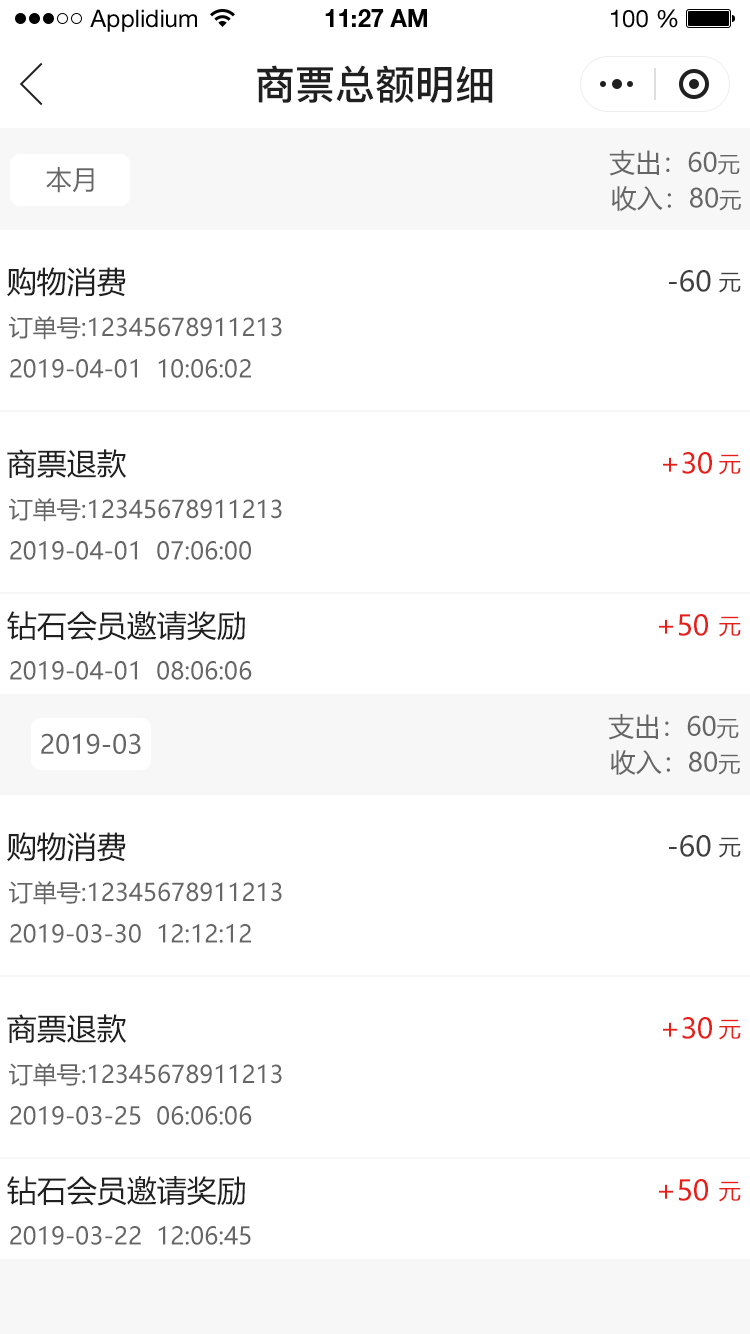
<style>
.page{position:relative;width:750px;height:1334px;background:#ffffff}
.page>*{position:absolute;margin:0}
.t1{font:24px "HelveticaNeueLTStd-Roman";color:#000000}
.t2{font:24px "HelveticaNeueLTStd-Bd";color:#000000}
.t3{font:40px "PingFang-SC-Bold";color:#202020;text-transform:uppercase}
.t4{font:26px "MicrosoftYaHei";color:#666666;text-transform:uppercase}
.t5{font:22px "MicrosoftYaHei";color:#666666;text-transform:uppercase}
.t6{font:30px "MicrosoftYaHei";color:#202020;text-transform:uppercase}
.t7{font:28px "MicrosoftYaHei";color:#404040;text-transform:uppercase}
.t8{font:22px "MicrosoftYaHei";color:#404040;text-transform:uppercase}
.t9{font:24px "MicrosoftYaHei";color:#666666;text-transform:uppercase}
.t10{font:28px "MicrosoftYaHei";color:#e61f18;text-transform:uppercase}
.t11{font:22px "MicrosoftYaHei";color:#e61f18;text-transform:uppercase}
</style>
<div class="page">
<p class="t1" style="left:90px;top:9px;width:107px;height:23px">Applidium</p>
<p class="t2" style="left:325px;top:9px;width:102px;height:18px">11:27 AM</p>
<p class="t1" style="left:611px;top:9px;width:67px;height:19px">100 %</p>
<p class="t3" style="left:257px;top:65px;width:236px;height:38px">商票总额明细</p>
<p class="t4" style="left:609px;top:150px;width:131px;height:26px">支出：60<span class="t5">元</span></p>
<p class="t4" style="left:46px;top:167px;width:48px;height:26px">本月</p>
<p class="t4" style="left:611px;top:186px;width:130px;height:25px">收入：80<span class="t5">元</span></p>
<p class="t6" style="left:7px;top:267px;width:119px;height:30px">购物消费</p>
<p class="t7" style="left:669px;top:270px;width:42px;height:22px">-60</p>
<p class="t8" style="left:719px;top:272px;width:22px;height:21px">元</p>
<p class="t9" style="left:9px;top:316px;width:273px;height:24px">订单号:12345678911213</p>
<p class="t9" style="left:10px;top:359px;width:241px;height:19px">2019-04-01  10:06:02</p>
<p class="t6" style="left:7px;top:449px;width:120px;height:29px">商票退款</p>
<p class="t10" style="left:663px;top:452px;width:49px;height:22px">+30</p>
<p class="t11" style="left:719px;top:454px;width:22px;height:21px">元</p>
<p class="t9" style="left:9px;top:498px;width:273px;height:24px">订单号:12345678911213</p>
<p class="t9" style="left:10px;top:541px;width:241px;height:19px">2019-04-01  07:06:00</p>
<p class="t6" style="left:7px;top:611px;width:238px;height:30px">钻石会员邀请奖励</p>
<p class="t10" style="left:659px;top:614px;width:49px;height:22px">+50</p>
<p class="t11" style="left:719px;top:616px;width:22px;height:21px">元</p>
<p class="t9" style="left:10px;top:661px;width:242px;height:19px">2019-04-01  08:06:06</p>
<p class="t4" style="left:608px;top:714px;width:131px;height:26px">支出：60<span class="t5">元</span></p>
<p class="t4" style="left:41px;top:733px;width:100px;height:21px">2019-03</p>
<p class="t4" style="left:610px;top:750px;width:130px;height:25px">收入：80<span class="t5">元</span></p>
<p class="t6" style="left:7px;top:832px;width:119px;height:30px">购物消费</p>
<p class="t7" style="left:669px;top:835px;width:42px;height:22px">-60</p>
<p class="t8" style="left:719px;top:837px;width:22px;height:21px">元</p>
<p class="t9" style="left:9px;top:881px;width:273px;height:24px">订单号:12345678911213</p>
<p class="t9" style="left:10px;top:924px;width:241px;height:19px">2019-03-30  12:12:12</p>
<p class="t6" style="left:7px;top:1014px;width:120px;height:29px">商票退款</p>
<p class="t10" style="left:663px;top:1017px;width:49px;height:22px">+30</p>
<p class="t11" style="left:719px;top:1019px;width:22px;height:21px">元</p>
<p class="t9" style="left:9px;top:1063px;width:273px;height:24px">订单号:12345678911213</p>
<p class="t9" style="left:10px;top:1106px;width:242px;height:19px">2019-03-25  06:06:06</p>
<p class="t6" style="left:7px;top:1176px;width:238px;height:30px">钻石会员邀请奖励</p>
<p class="t10" style="left:659px;top:1179px;width:49px;height:22px">+50</p>
<p class="t11" style="left:719px;top:1181px;width:22px;height:21px">元</p>
<p class="t9" style="left:10px;top:1226px;width:241px;height:19px">2019-03-22  12:06:45</p>
</div>
